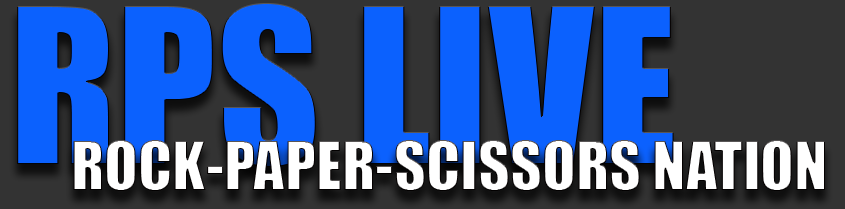
<style>
.page{position:relative;width:845px;height:209px;background:#0b61fe}
.page>*{position:absolute;margin:0}
.t1{font:200px "Impact";color:#0b61fe}
.t2{font:62px "Impact";color:#ffffff}
</style>
<div class="page">
<p class="t1" style="left:17px;top:3px;width:657px;height:164px">RPS LIVE</p>
<p class="t2" style="left:73px;top:140px;width:752px;height:51px">ROCK-PAPER-SCISSORS NATION</p>
</div>
